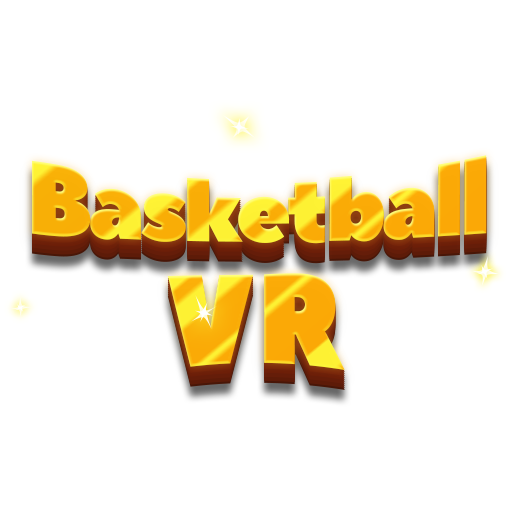
<style>
.page{position:relative;width:512px;height:512px;background:#ffffff}
.page>*{position:absolute;margin:0}
.t1{font:104.9px "PeaceSans";letter-spacing:-0.05em;scale:0.87 1}
.t2{font:134.2px "PeaceSans";letter-spacing:0.025em;scale:0.87 1}
</style>
<div class="page">
<p class="t1" style="left:32px;top:155px;width:455px;height:89px">Basketball</p>
<p class="t2" style="left:167px;top:273px;width:178px;height:97px">VR</p>
</div>
